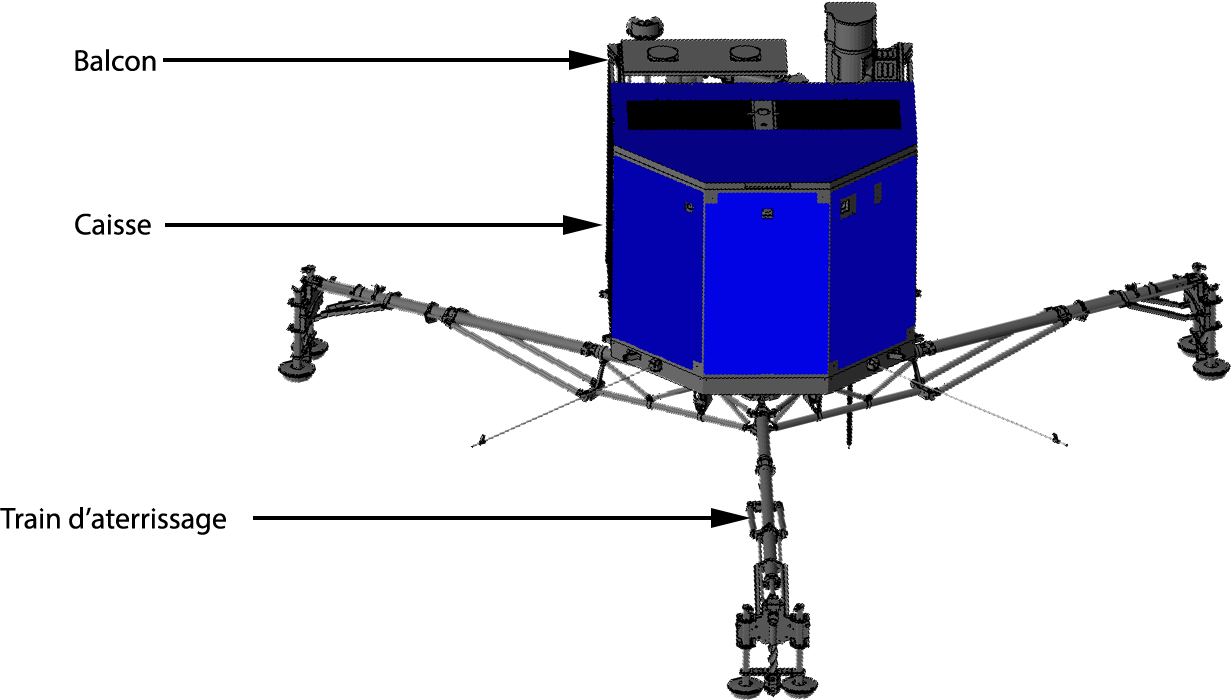
<style>
.page{position:relative;width:1232px;height:700px;background:#ffffff}
.page>*{position:absolute;margin:0}
.t1{font:30px "MyriadPro-Regular";color:#000000}
</style>
<div class="page">
<p class="t1" style="left:75px;top:49px;width:81px;height:22px">Balcon</p>
<p class="t1" style="left:75px;top:213px;width:76px;height:22px">Caisse</p>
<p class="t1" style="left:0px;top:507px;width:226px;height:28px">Train d’aterrissage</p>
</div>
